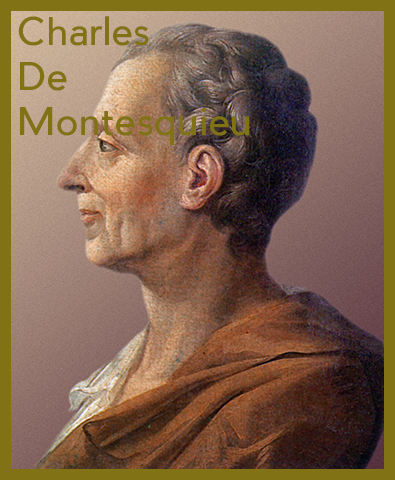
<style>
.page{position:relative;width:395px;height:480px}
.page>*{position:absolute;margin:0}
.t1{font:37.5px "PierSans";color:#807215}
</style>
<div class="page">
<p class="t1" style="left:18px;top:16px;width:231px;height:129px">Charles<br>De<br>Montesquieu</p>
</div>
